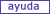
<style>
.page{position:relative;width:50px;height:14px;background:#ffffff}
.page>*{position:absolute;margin:0}
.t1{font:10px "Verdana";color:#553da1;font-weight:bold}
</style>
<div class="page">
<p class="t1" style="left:8px;top:1px;width:31px;height:11px">ayuda</p>
</div>
